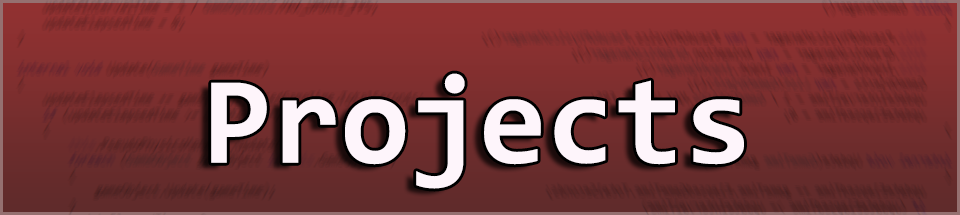
<style>
.page{position:relative;width:960px;height:215px}
.page>*{position:absolute;margin:0}
.t1{font:125px "Consolas-Bold";color:#fef5fb}
</style>
<div class="page">
<p class="t1" style="left:211px;top:73px;width:533px;height:116px">Projects</p>
</div>
